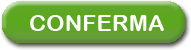
<style>
.page{position:relative;width:191px;height:50px}
.page>*{position:absolute;margin:0}
.t1{font:23.3px "ArialRoundedMTBold";color:#ffffff}
</style>
<div class="page">
<p class="t1" style="left:30px;top:15px;width:134px;height:16px">CONFERMA</p>
</div>
